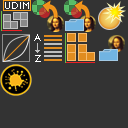
<style>
.page{position:relative;width:128px;height:128px;background:#333333}
.page>*{position:absolute;margin:0}
.t1{font:10px "GillSans";color:#ffffff}
</style>
<div class="page">
<p class="t1" style="left:5px;top:2px;width:24px;height:7px">UDIM</p>
<p class="t1" style="left:34px;top:34px;width:7px;height:7px">A</p>
<p class="t1" style="left:35px;top:55px;width:6px;height:7px">Z</p>
</div>
